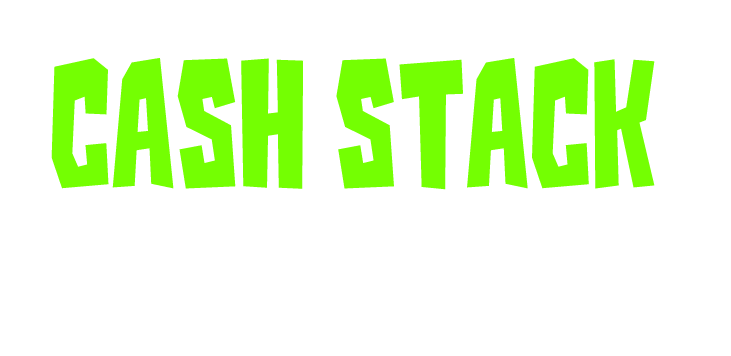
<style>
.page{position:relative;width:731px;height:356px;background:#ffffff}
.page>*{position:absolute;margin:0}
.t1{font:156.1px "Kaiju-Monster__G";color:#74ff02}
</style>
<div class="page">
<p class="t1" style="left:51px;top:58px;width:604px;height:132px">Cash Stack</p>
</div>
